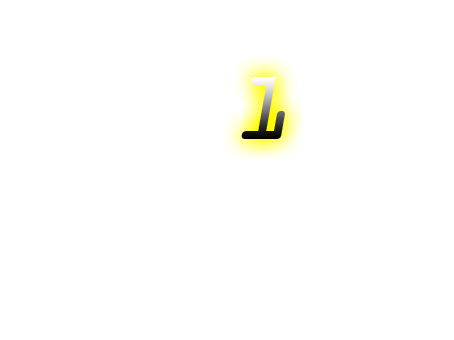
<style>
.page{position:relative;width:454px;height:340px;background:#ffffff}
.page>*{position:absolute;margin:0}
.t1{font:80px "OCRAStd";font-style:italic}
</style>
<div class="page">
<p class="t1" style="left:241px;top:77px;width:44px;height:62px">1</p>
</div>
